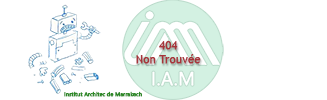
<style>
.page{position:relative;width:327px;height:100px;background:#ffffff}
.page>*{position:absolute;margin:0}
.t1{font:11.1px "TrebuchetMS";color:#a7343a;font-weight:bold}
.t2{font:5.6px "SegoeUI";color:#2e8927;font-weight:bold}
</style>
<div class="page">
<p class="t1" style="left:136px;top:41px;width:65px;height:23px;text-align:center">404<br>Non Trouvée</p>
<p class="t2" style="left:64px;top:91px;width:78px;height:6px">Institut Architec de Marrakech</p>
</div>
